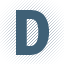
<style>
.page{position:relative;width:64px;height:64px;background:#ffffff}
.page>*{position:absolute;margin:0}
.t1{font:72px "Delicious-Heavy";color:#3f6076}
</style>
<div class="page">
<p class="t1" style="left:16px;top:10px;width:33px;height:45px">D</p>
</div>
